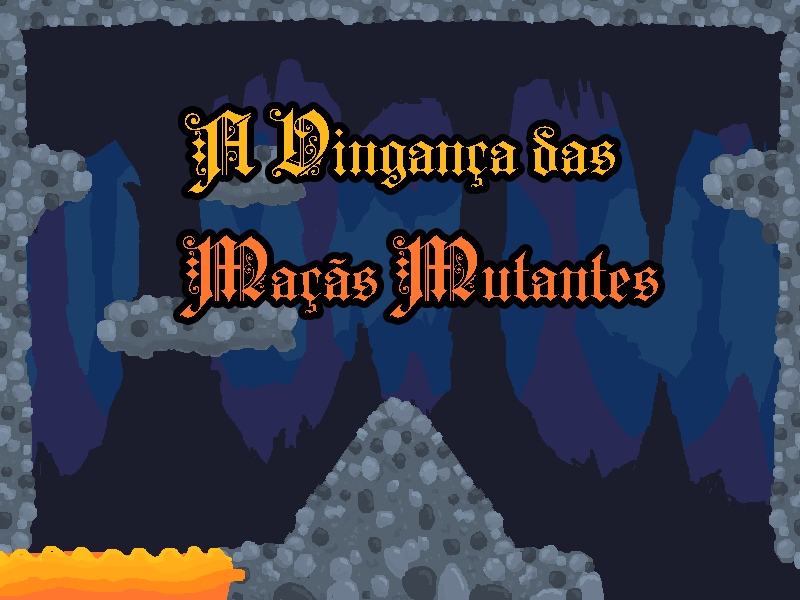
<style>
.page{position:relative;width:800px;height:600px;background:#1b1c2c}
.page>*{position:absolute;margin:0}
.t1{font:72px "KaiserzeitGotisch";color:#ffba1a}
.t2{font:96px "KaiserzeitGotisch";color:#ffba1a}
.t3{font:72px "KaiserzeitGotisch";color:#ff772e}
.t4{font:96px "KaiserzeitGotisch";color:#ff772e}
</style>
<div class="page">
<p class="t1" style="left:185px;top:108px;width:430px;height:85px"><span class="t2">A V</span>ingança das</p>
<p class="t3" style="left:180px;top:235px;width:478px;height:83px"><span class="t4">M</span>açãs <span class="t4">M</span>utantes</p>
</div>
